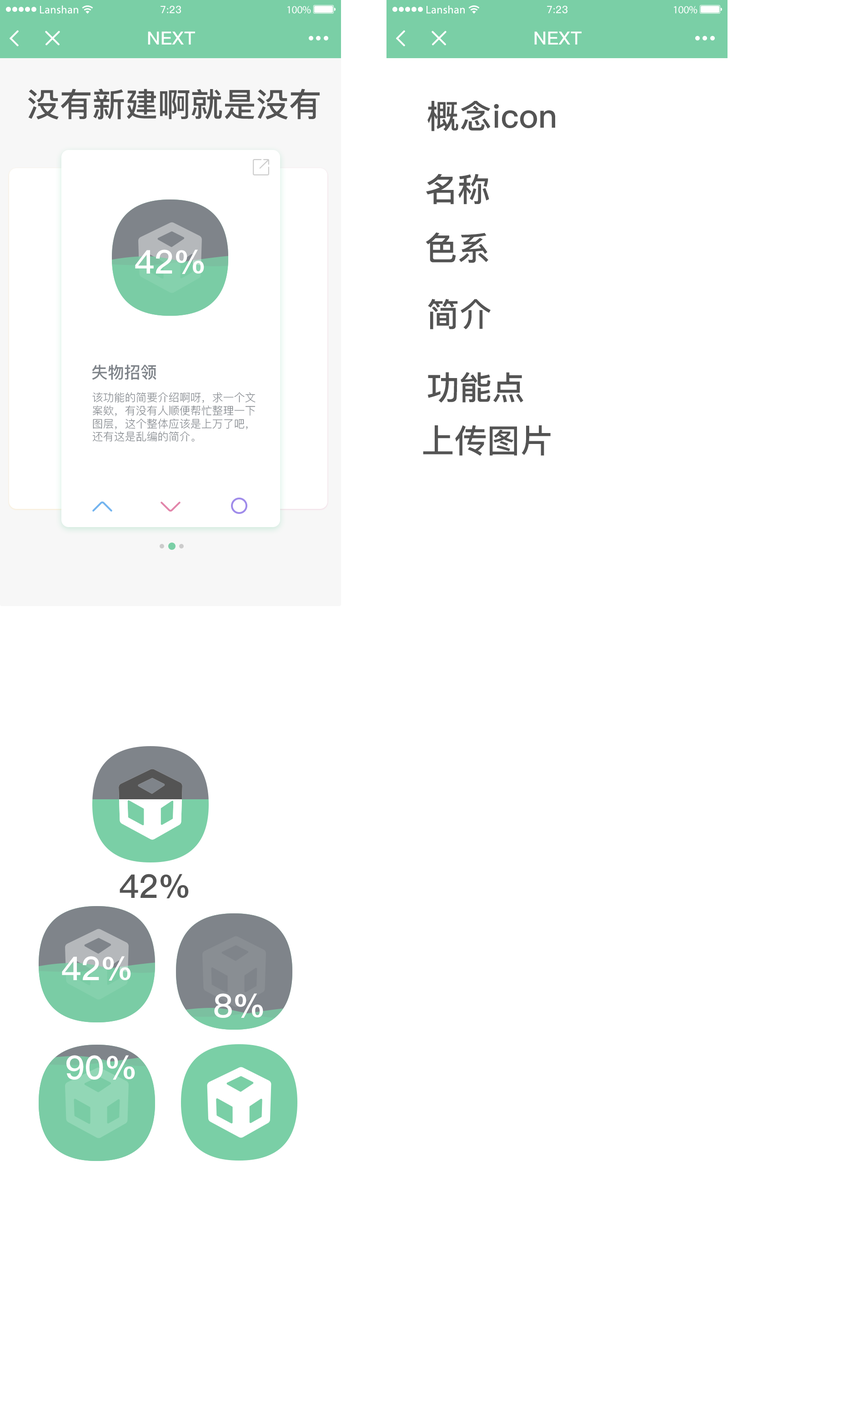
<style>
.page{position:relative;width:843px;height:1415px;background:#ffffff}
.page>*{position:absolute;margin:0}
.t1{font:32.7px "PingFang-SC-Bold";color:#545454}
.t2{font:32.7px "PingFang-SC-Bold";color:#ffffff}
.t3{font:16.4px "PingFang-SC-Bold";color:#7f848a}
.t4{font:10.9px "PingFang-SC-Regular";color:#7f848a}
</style>
<div class="page">
<p class="t1" style="left:28px;top:89px;width:291px;height:31px">没有新建啊就是没有</p>
<p class="t1" style="left:427px;top:101px;width:128px;height:30px">概念icon</p>
<p class="t1" style="left:426px;top:174px;width:63px;height:31px">名称</p>
<p class="t1" style="left:425px;top:232px;width:63px;height:31px">色系</p>
<p class="t2" style="left:135px;top:250px;width:69px;height:24px">42%</p>
<p class="t1" style="left:428px;top:299px;width:62px;height:30px">简介</p>
<p class="t3" style="left:92px;top:364px;width:64px;height:16px">失物招领</p>
<p class="t1" style="left:427px;top:372px;width:96px;height:31px">功能点</p>
<p class="t4" style="left:92px;top:392px;width:163px;height:50px">该功能的简要介绍啊呀，求一个文案欸，有没有人顺便帮忙整理一下图层，这个整体应该是上万了吧，还有这是乱编的简介。</p>
<p class="t1" style="left:423px;top:425px;width:127px;height:31px">上传图片</p>
<p class="t1" style="left:120px;top:874px;width:69px;height:24px">42%</p>
<p class="t2" style="left:62px;top:956px;width:69px;height:25px">42%</p>
<p class="t2" style="left:214px;top:993px;width:49px;height:25px">8%</p>
<p class="t2" style="left:66px;top:1055px;width:69px;height:25px">90%</p>
</div>
